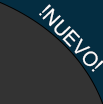
<style>
.page{position:relative;width:103px;height:104px;background:#333333}
.page>*{position:absolute;margin:0}
.t1{font:20px "ArialMT";color:#fcfbfb}
</style>
<div class="page">
<p class="t1" style="left:39px;top:4px;width:65px;height:68px;rotate:46deg">!NUEVO!</p>
</div>
